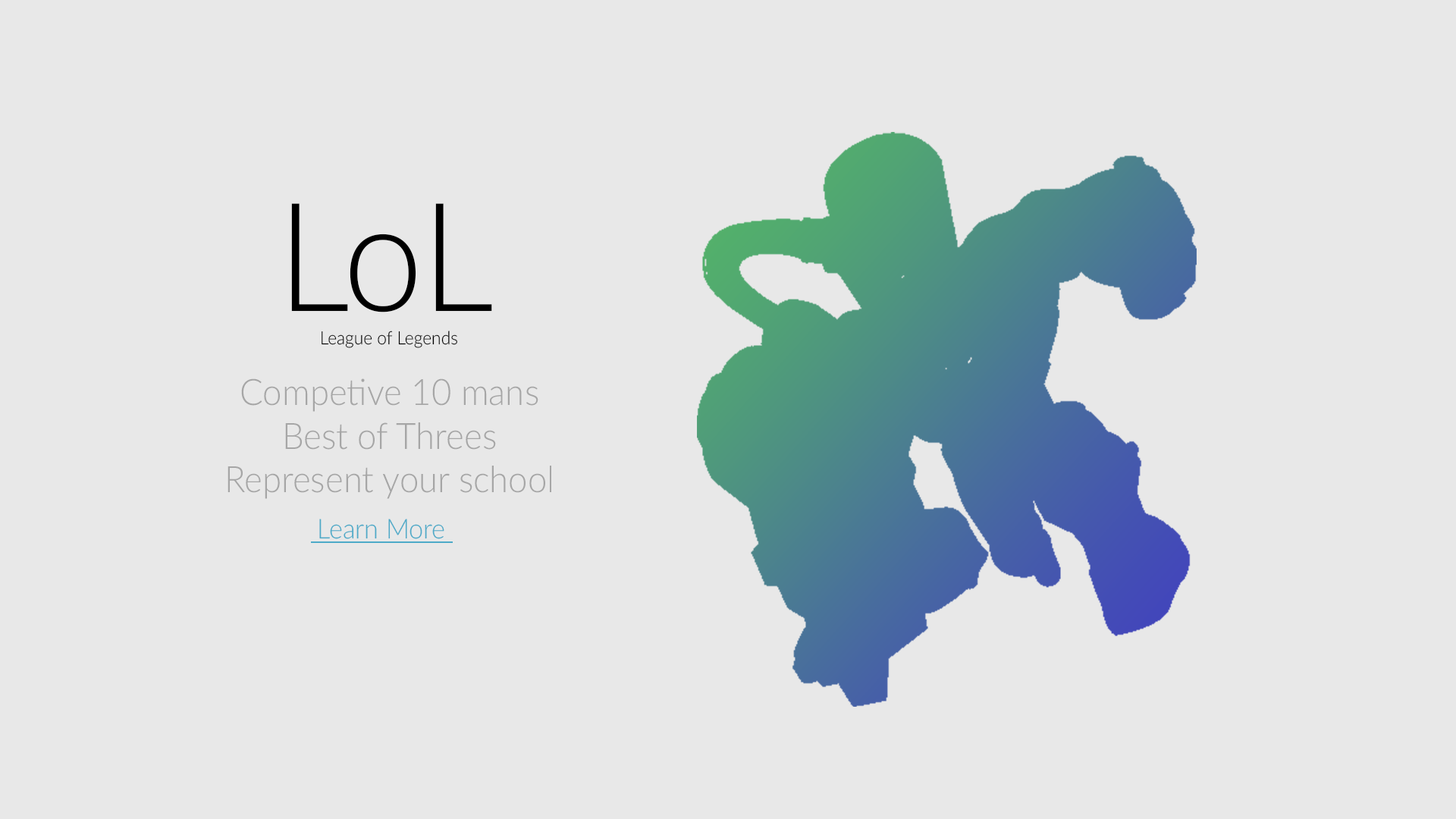
<style>
.page{position:relative;width:1456px;height:819px;background:#e8e8e8}
.page>*{position:absolute;margin:0}
.t1{font:151.7px "Lato-Light";color:#000000;scale:0.95 1}
.t2{font:18.2px "Lato-Light";color:#000000;scale:0.95 1}
.t3{font:36.4px "Lato-Light";color:#a6a6a6;scale:0.95 1}
.t4{font:27.3px "Lato-Light";color:#4daac8;scale:0.95 1}
</style>
<div class="page">
<p class="t1" style="left:291px;top:203px;width:201px;height:109px">LoL</p>
<p class="t2" style="left:322px;top:331px;width:135px;height:17px">League of Legends</p>
<p class="t3" style="left:227px;top:378px;width:324px;height:121px;text-align:center">Competive 10 mans<br>Best of Threes<br>Represent your school</p>
<p class="t4" style="left:319px;top:519px;width:125px;height:20px">Learn More</p>
</div>
